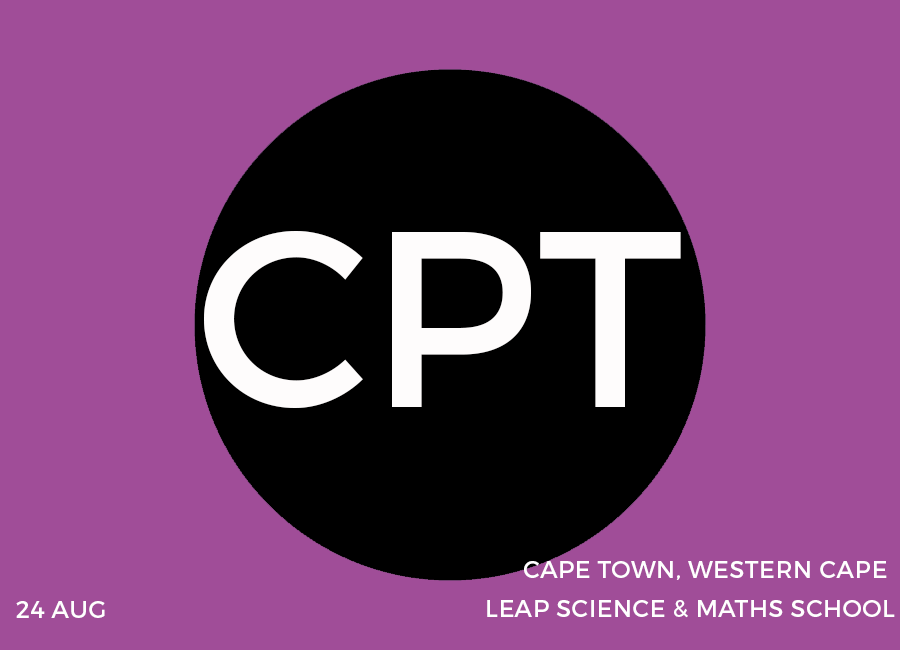
<style>
.page{position:relative;width:900px;height:650px;background:#a04d98}
.page>*{position:absolute;margin:0}
.t1{font:24px "Montserrat-Regular";letter-spacing:0.02em;color:#ffffff}
</style>
<div class="page">
<p class="t1" style="left:524px;top:561px;width:363px;height:19px">CAPE TOWN, WESTERN CAPE</p>
<p class="t1" style="left:16px;top:601px;width:89px;height:17px">24 AUG</p>
<p class="t1" style="left:487px;top:600px;width:408px;height:18px">LEAP SCIENCE &amp; MATHS SCHOOL</p>
</div>
